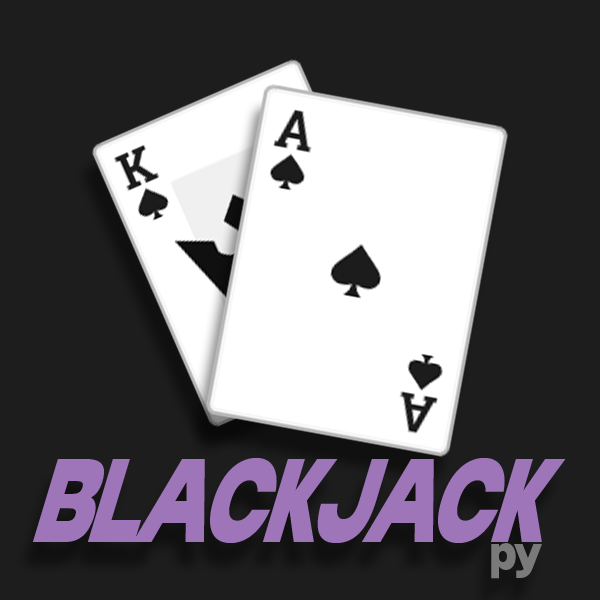
<style>
.page{position:relative;width:600px;height:600px;background:#1d1d1d}
.page>*{position:absolute;margin:0}
.t1{font:124.1px "Candu";letter-spacing:-0.04em;color:#9e75b8;scale:0.64 1}
.t2{font:49.6px "Candu";letter-spacing:-0.04em;color:#7a7a7a;scale:0.85 1}
</style>
<div class="page">
<p class="t1" style="left:32px;top:457px;width:534px;height:86px">BLACKJACK</p>
<p class="t2" style="left:491px;top:543px;width:51px;height:36px">py</p>
</div>
